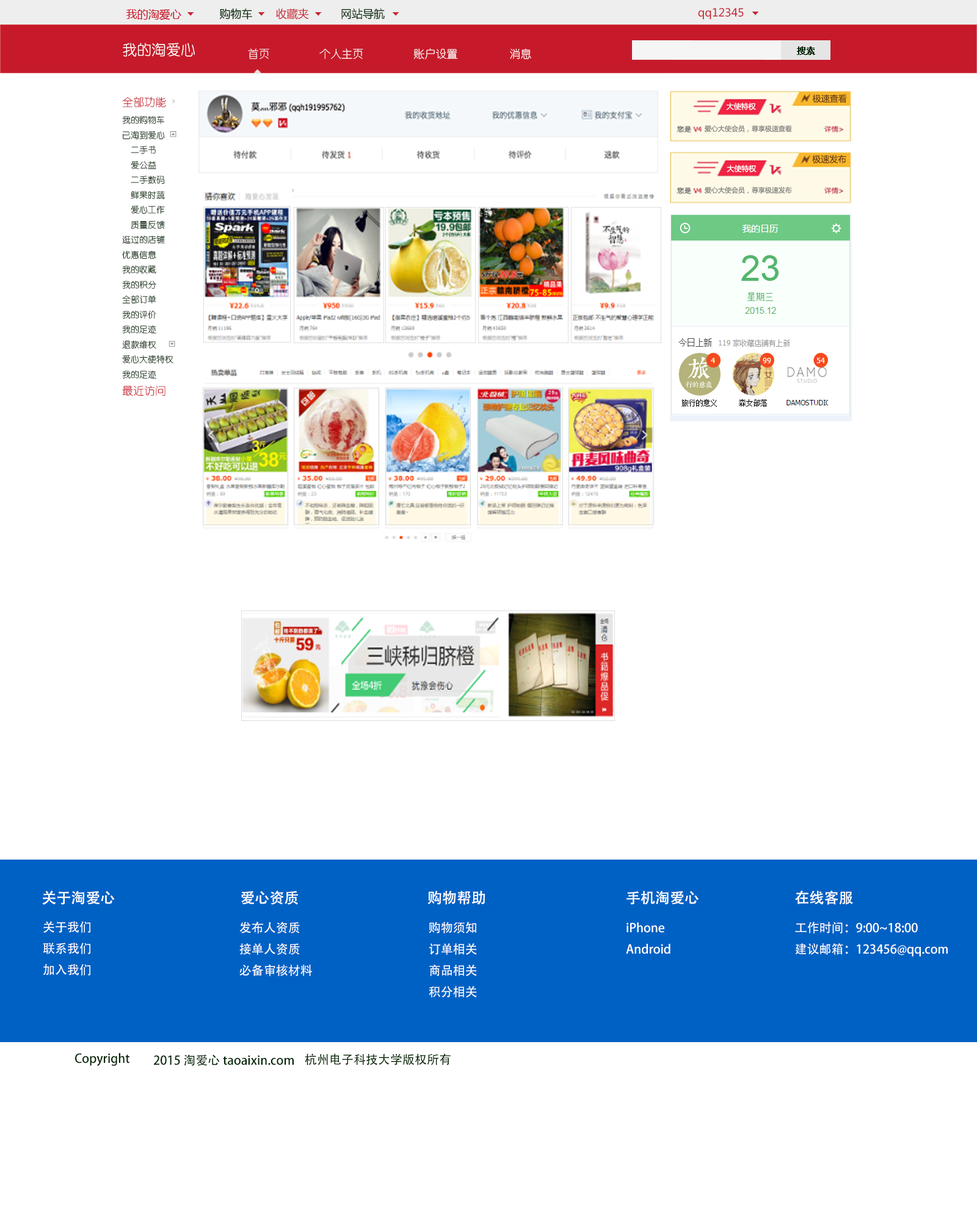
<style>
.page{position:relative;width:977px;height:1221px;background:#ffffff}
.page>*{position:absolute;margin:0}
.t1{font:11px "MicrosoftYaHei";color:#002400}
.t2{font:11px "MicrosoftYaHei";color:#c82433}
.t3{font:14.7px "YouYuan";color:#ffffff}
.t4{font:11px "YouYuan";color:#ffffff}
.t5{font:8.8px "MicrosoftYaHei";color:#002400;text-transform:uppercase;font-weight:bold}
.t6{font:8.5px "YouYuan";color:#c61a2a}
.t7{font:11px "YouYuan";color:#c61a2a}
.t8{font:8.5px "MicrosoftYaHei";color:#6e4218}
.t9{font:7.3px "MicrosoftYaHei";color:#ffffff}
.t10{font:6.7px "MicrosoftYaHei";color:#80807d}
.t11{font:8.5px "MicrosoftYaHei";color:#714020}
.t12{font:14.7px "AdobeHeitiStd-Regular";color:#ffffff}
.t13{font:12.2px "AdobeHeitiStd-Regular";color:#ffffff}
.t14{font:12.2px "AdobeHeitiStd-Regular";color:#002400}
</style>
<div class="page">
<p class="t1" style="left:219px;top:8px;width:33px;height:12px">购物车</p>
<p class="t2" style="left:276px;top:8px;width:33px;height:12px">收藏夹</p>
<p class="t1" style="left:341px;top:9px;width:44px;height:11px">网站导航</p>
<p class="t2" style="left:698px;top:8px;width:46px;height:12px">qq12345</p>
<p class="t3" style="left:123px;top:43px;width:72px;height:14px">我的淘爱心</p>
<p class="t4" style="left:319px;top:48px;width:44px;height:11px">个人主页</p>
<p class="t4" style="left:413px;top:48px;width:45px;height:11px">账户设置</p>
<p class="t4" style="left:510px;top:48px;width:21px;height:11px">消息</p>
<p class="t5" style="left:797px;top:46px;width:18px;height:9px">搜索</p>
<p class="t6" style="left:122px;top:96px;width:51px;height:300px"><span class="t7">全部功能<br></span>我的购物车<br>已淘到爱心<br>  二手书<br>  爱公益<br>  二手数码<br>  鲜果时蔬<br>  爱心工作<br>  质量反馈 <br>逛过的店铺<br>优惠信息<br>我的收藏<br>我的积分<br>全部订单<br>我的评价<br>我的足迹<br>退款维权<br>爱心大使特权<br>我的足迹<br><span class="t7">最近访问</span></p>
<p class="t8" style="left:812px;top:94px;width:35px;height:9px">极速查看</p>
<p class="t9" style="left:726px;top:103px;width:30px;height:7px">大使特权</p>
<p class="t10" style="left:704px;top:125px;width:88px;height:7px">爱心大使会员，尊享极速查看</p>
<p class="t11" style="left:812px;top:154px;width:34px;height:10px">极速发布</p>
<p class="t9" style="left:726px;top:165px;width:30px;height:7px">大使特权</p>
<p class="t10" style="left:704px;top:187px;width:88px;height:7px">爱心大使会员，尊享极速发布</p>
<p class="t12" style="left:42px;top:891px;width:73px;height:14px">关于淘爱心</p>
<p class="t12" style="left:241px;top:891px;width:57px;height:14px">爱心资质</p>
<p class="t12" style="left:427px;top:891px;width:58px;height:14px">购物帮助</p>
<p class="t12" style="left:626px;top:891px;width:72px;height:14px">手机淘爱心</p>
<p class="t12" style="left:795px;top:891px;width:58px;height:14px">在线客服</p>
<p class="t13" style="left:43px;top:921px;width:47px;height:54px;text-align:justify">关于我们<br>联系我们<br>加入我们</p>
<p class="t13" style="left:239px;top:921px;width:73px;height:55px;text-align:justify">发布人资质<br>接单人资质<br>必备审核材料</p>
<p class="t13" style="left:429px;top:922px;width:48px;height:75px;text-align:justify">购物须知<br>订单相关<br>商品相关<br>积分相关</p>
<p class="t13" style="left:626px;top:922px;width:44px;height:32px;text-align:justify">iPhone<br>Android</p>
<p class="t13" style="left:795px;top:922px;width:152px;height:35px;text-align:justify">工作时间：9:00~18:00<br>建议邮箱：123456@qq.com</p>
<p class="t14" style="left:75px;top:1053px;width:54px;height:13px">Copyright</p>
<p class="t14" style="left:154px;top:1054px;width:140px;height:12px">2015 淘爱心 taoaixin.com</p>
<p class="t14" style="left:305px;top:1053px;width:146px;height:12px">杭州电子科技大学版权所有</p>
</div>
